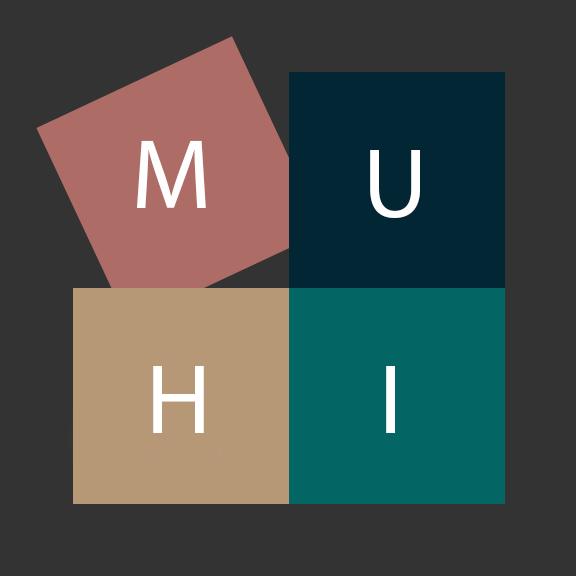
<style>
.page{position:relative;width:576px;height:576px;background:#333333}
.page>*{position:absolute;margin:0}
.t1{font:100px "MyriadPro-Regular";color:#fefefe}
.t2{font:100px "MyriadPro-Regular";color:#ffffff}
</style>
<div class="page">
<p class="t1" style="left:137px;top:140px;width:69px;height:68px">M</p>
<p class="t2" style="left:370px;top:150px;width:50px;height:68px">U</p>
<p class="t2" style="left:153px;top:366px;width:51px;height:67px">H</p>
<p class="t2" style="left:386px;top:366px;width:9px;height:67px">I</p>
</div>
